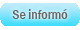
<style>
.page{position:relative;width:80px;height:30px;background:#ffffff}
.page>*{position:absolute;margin:0}
.t1{font:14px "FranklinGothic-MediumCond";color:#666666}
</style>
<div class="page">
<p class="t1" style="left:12px;top:9px;width:56px;height:10px">Se informó</p>
</div>
